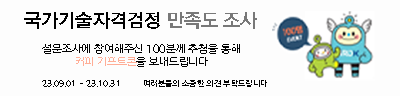
<style>
.page{position:relative;width:400px;height:96px;background:#fdfdfd}
.page>*{position:absolute;margin:0}
.t1{font:18.7px "RixSinGoSEPB";color:#000000}
.t2{font:18.7px "RixSinGoSEPB";color:#787878}
.t3{font:10.7px/13.3px "RixSinGoSEPL";color:#000000}
.t4{font:10.7px/13.3px "RixSinGoSEPL";color:#ffae97}
.t5{font:8px "RixSinGoSEPB";color:#000000}
</style>
<div class="page">
<p class="t1" style="left:24px;top:12px;width:233px;height:17px">국가기술자격검정 <span class="t2">만족도 조사</span></p>
<p class="t3" style="left:42px;top:44px;width:198px;height:23px;text-align:center">설문조사에 참여해주신 100분께 추첨을 통해 <br><span class="t4">커피 기프트콘</span>을 보내드립니다</p>
<p class="t5" style="left:42px;top:80px;width:77px;height:7px">23.09.01 - 23.10.31</p>
<p class="t5" style="left:144px;top:80px;width:123px;height:7px">여러분들의 소중한 의견 부탁드립니다</p>
</div>
